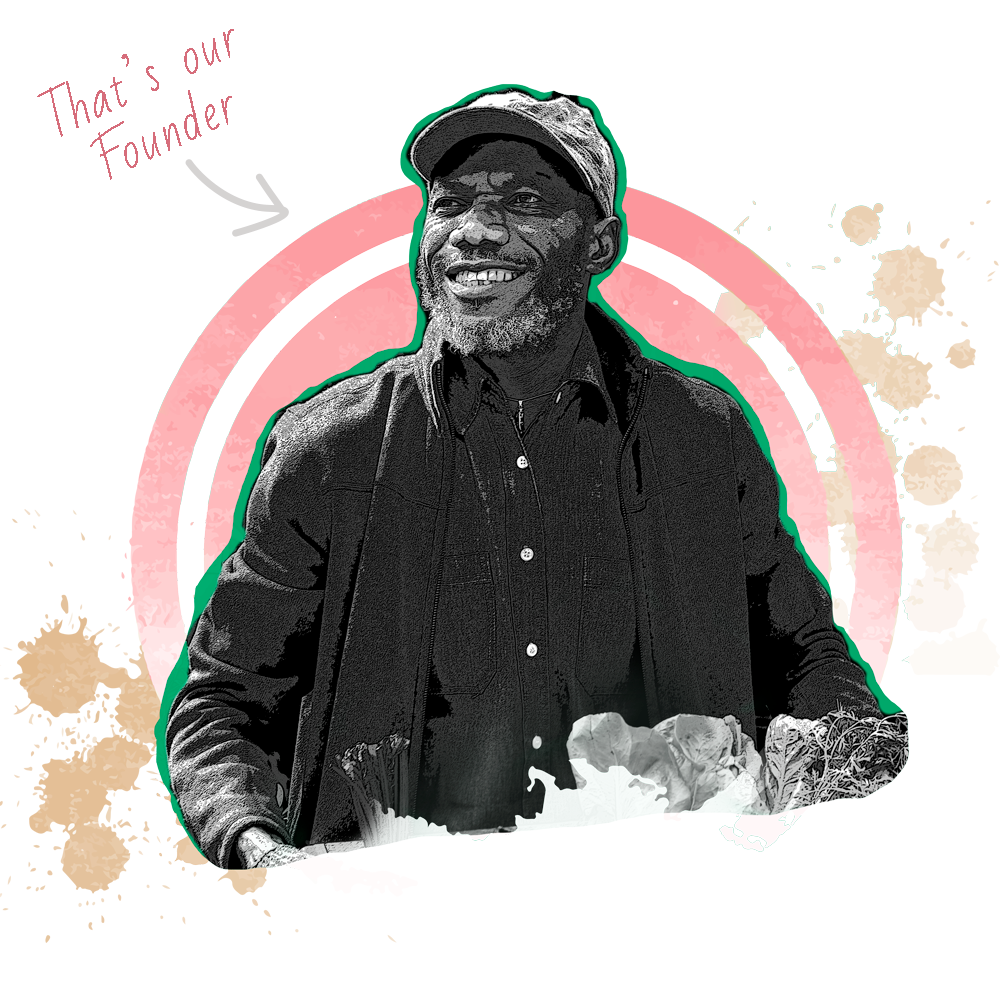
<style>
.page{position:relative;width:1000px;height:1000px;background:#ffffff}
.page>*{position:absolute;margin:0}
.t1{font:48px/60px "BadScript-Regular";letter-spacing:0.06em;color:#d66d7b}
</style>
<div class="page">
<p class="t1" style="left:37px;top:29px;width:197px;height:151px;text-align:center;rotate:-25deg">That’s our<br>Founder</p>
</div>
